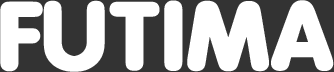
<style>
.page{position:relative;width:334px;height:72px;background:#ffffff}
.page>*{position:absolute;margin:0}
.t1{font:96px "VAGRundschriftBQ";color:#ffffff;font-weight:bold}
</style>
<div class="page">
<p class="t1" style="left:0px;top:0px;width:334px;height:72px">FUTIMA</p>
</div>
